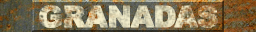
<style>
.page{position:relative;width:256px;height:32px}
.page>*{position:absolute;margin:0}
.t1{font:29.3px "Arial-Black";letter-spacing:-0.04em;text-transform:uppercase;font-weight:bold}
</style>
<div class="page">
<p class="t1" style="left:39px;top:5px;width:179px;height:23px">GRANADAS</p>
</div>
